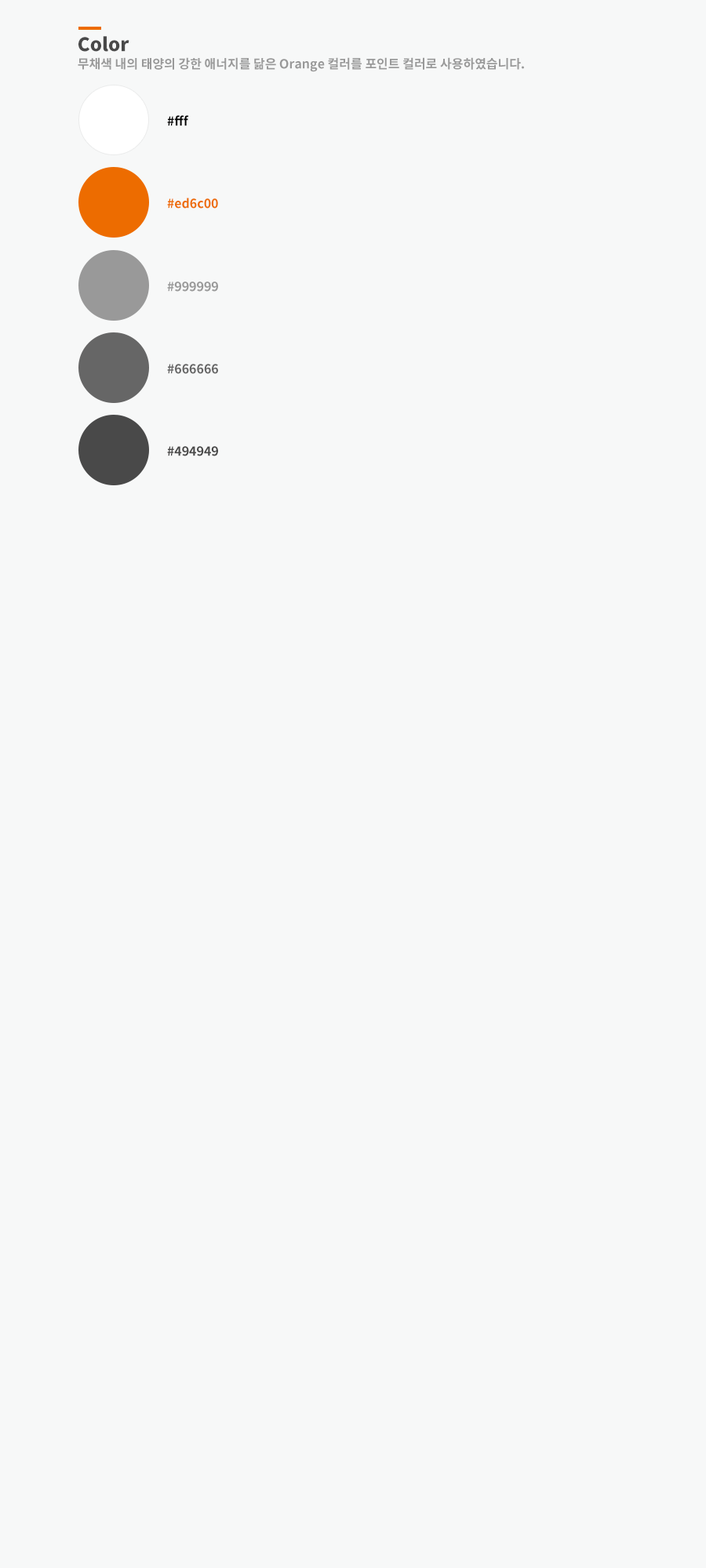
<style>
.page{position:relative;width:706px;height:1568px;background:#f7f8f8}
.page>*{position:absolute;margin:0}
.t1{font:18.8px "SourceHanSansK-Heavy";color:#494949}
.t2{font:12.5px "SourceHanSansK-Bold";color:#999999}
.t3{font:12.5px "SourceHanSansK-Bold";color:#000000}
.t4{font:12.5px "SourceHanSansK-Bold";color:#ed6c00}
.t5{font:12.5px "SourceHanSansK-Bold";color:#666666}
.t6{font:12.5px "SourceHanSansK-Bold";color:#494949}
</style>
<div class="page">
<p class="t1" style="left:78px;top:36px;width:51px;height:16px">Color</p>
<p class="t2" style="left:78px;top:57px;width:446px;height:15px">무채색 내의 태양의 강한 애너지를 닮은 Orange 컬러를 포인트 컬러로 사용하였습니다.</p>
<p class="t3" style="left:167px;top:115px;width:22px;height:11px">#fff</p>
<p class="t4" style="left:167px;top:198px;width:51px;height:11px">#ed6c00</p>
<p class="t2" style="left:167px;top:281px;width:51px;height:11px">#999999</p>
<p class="t5" style="left:167px;top:364px;width:51px;height:10px">#666666</p>
<p class="t6" style="left:167px;top:446px;width:51px;height:10px">#494949</p>
</div>
